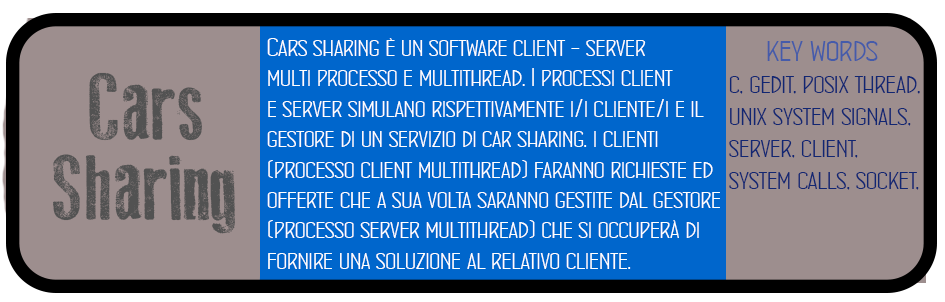
<style>
.page{position:relative;width:945px;height:302px;background:#9d8e8e}
.page>*{position:absolute;margin:0}
.t1{font:25.3px "ConcursoItalianBTNWide";color:#ffffff}
.t2{font:26.7px "ConcursoItalianBTNWide";color:#112672}
.t3{font:32px "ConcursoItalianBTNWide";color:#455baa}
.t4{font:93.3px "OldPress";color:#525252}
.t5{font:80px "ConcursoItalianBTNWide";color:#525252}
</style>
<div class="page">
<p class="t1" style="left:267px;top:38px;width:453px;height:231px">Cars sharing è un software client - server <br>multi processo e multithread. I processi client<br>e server simulano rispettivamente i/i cliente/i e il<br>gestore di un servizio di car sharing. i clienti <br>(processo client multithread) faranno richieste ed<br>offerte che a sua volta saranno gestite dal gestore<br>(processo server multithread) che si occuperà di<br>fornire una soluzione al relativo cliente.</p>
<p class="t2" style="left:729px;top:41px;width:191px;height:149px"><span class="t3">     key words<br></span>c, gedit, posix thread,<br>unix system signals,<br>server, client,<br>system calls, socket,</p>
<p class="t4" style="left:89px;top:72px;width:113px;height:69px"><span class="t5"> </span>Cars</p>
<p class="t4" style="left:53px;top:154px;width:182px;height:80px">Sharing</p>
</div>
